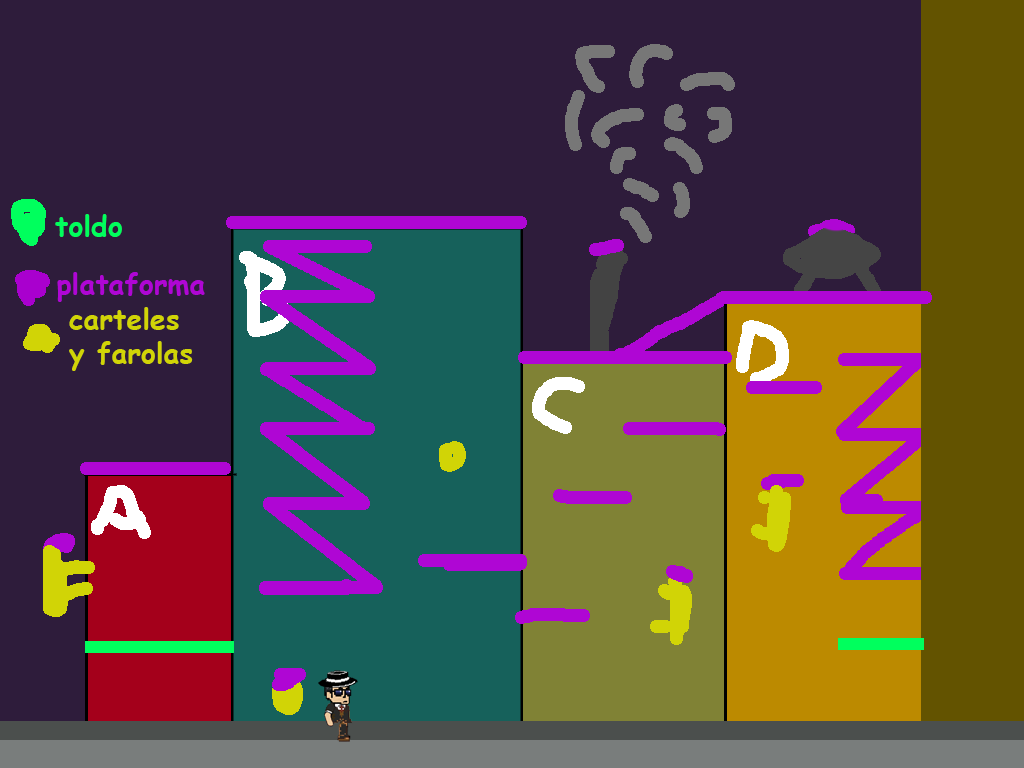
<style>
.page{position:relative;width:1024px;height:768px;background:#2e1c3b}
.page>*{position:absolute;margin:0}
.t1{font:28.4px "ComicSansMS-Bold";color:#00ff5d}
.t2{font:28.4px "ComicSansMS-Bold";color:#af06d4}
.t3{font:28.4px "ComicSansMS-Bold";color:#d1d406}
</style>
<div class="page">
<p class="t1" style="left:55px;top:214px;width:67px;height:23px">toldo</p>
<p class="t2" style="left:57px;top:272px;width:148px;height:30px">plataforma</p>
<p class="t3" style="left:69px;top:307px;width:124px;height:64px">carteles <br>y farolas</p>
</div>
